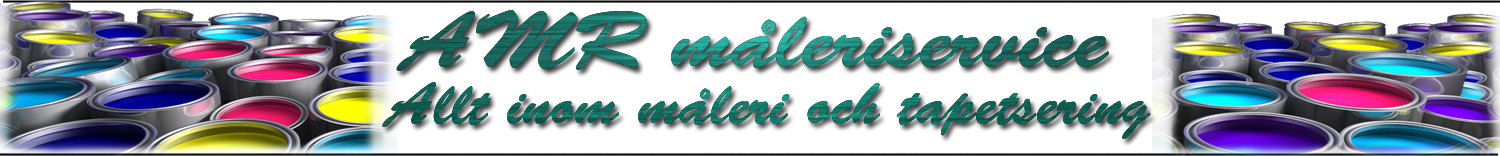
<style>
.page{position:relative;width:1500px;height:156px;background:#ffffff}
.page>*{position:absolute;margin:0}
.t1{font:80px "BrushScriptStd";scale:1.1 1}
.t2{font:60px "BrushScriptStd";color:#10685b}
</style>
<div class="page">
<p class="t1" style="left:396px;top:10px;width:713px;height:61px">AMR måleriservice</p>
<p class="t2" style="left:382px;top:82px;width:769px;height:57px">Allt inom måleri och tapetsering</p>
</div>
